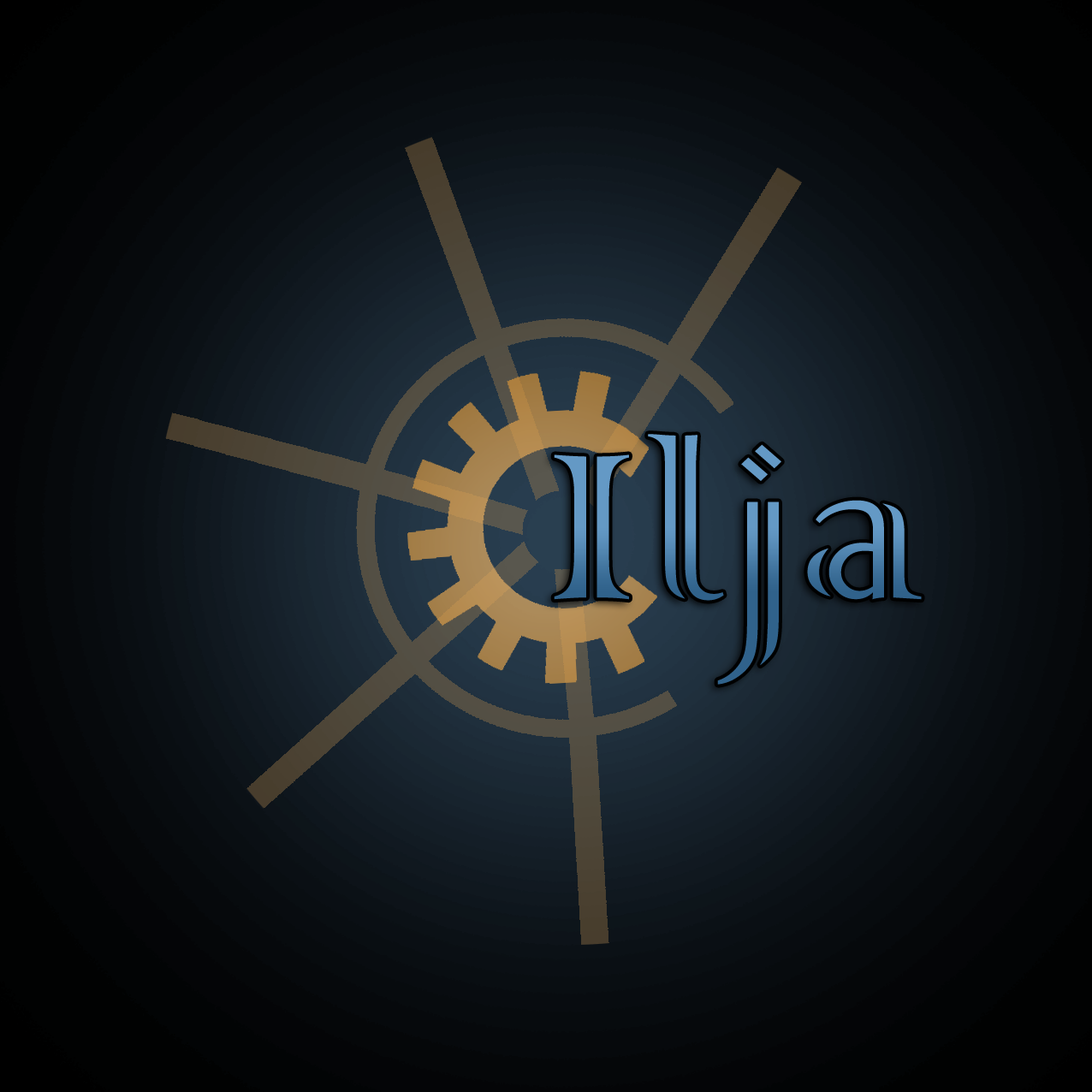
<style>
.page{position:relative;width:1092px;height:1092px}
.page>*{position:absolute;margin:0}
.t1{font:273.9px "ColonnaMT";scale:1.08 1}
</style>
<div class="page">
<p class="t1" style="left:554px;top:434px;width:368px;height:251px">Ilja</p>
</div>
